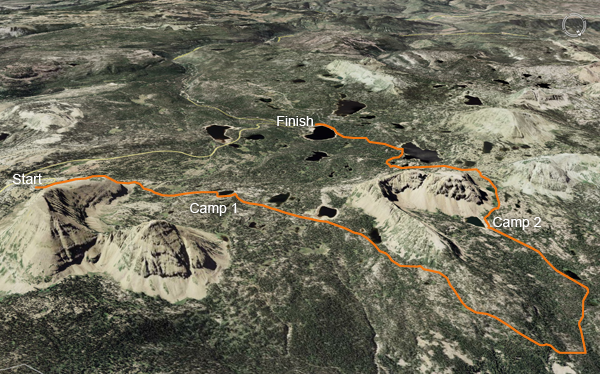
<style>
.page{position:relative;width:600px;height:374px}
.page>*{position:absolute;margin:0}
.t1{font:14px "ArialMT";color:#ffffff}
</style>
<div class="page">
<p class="t1" style="left:277px;top:116px;width:36px;height:10px">Finish</p>
<p class="t1" style="left:12px;top:173px;width:30px;height:11px">Start</p>
<p class="t1" style="left:190px;top:203px;width:47px;height:13px">Camp 1</p>
<p class="t1" style="left:493px;top:217px;width:48px;height:13px">Camp 2</p>
</div>
